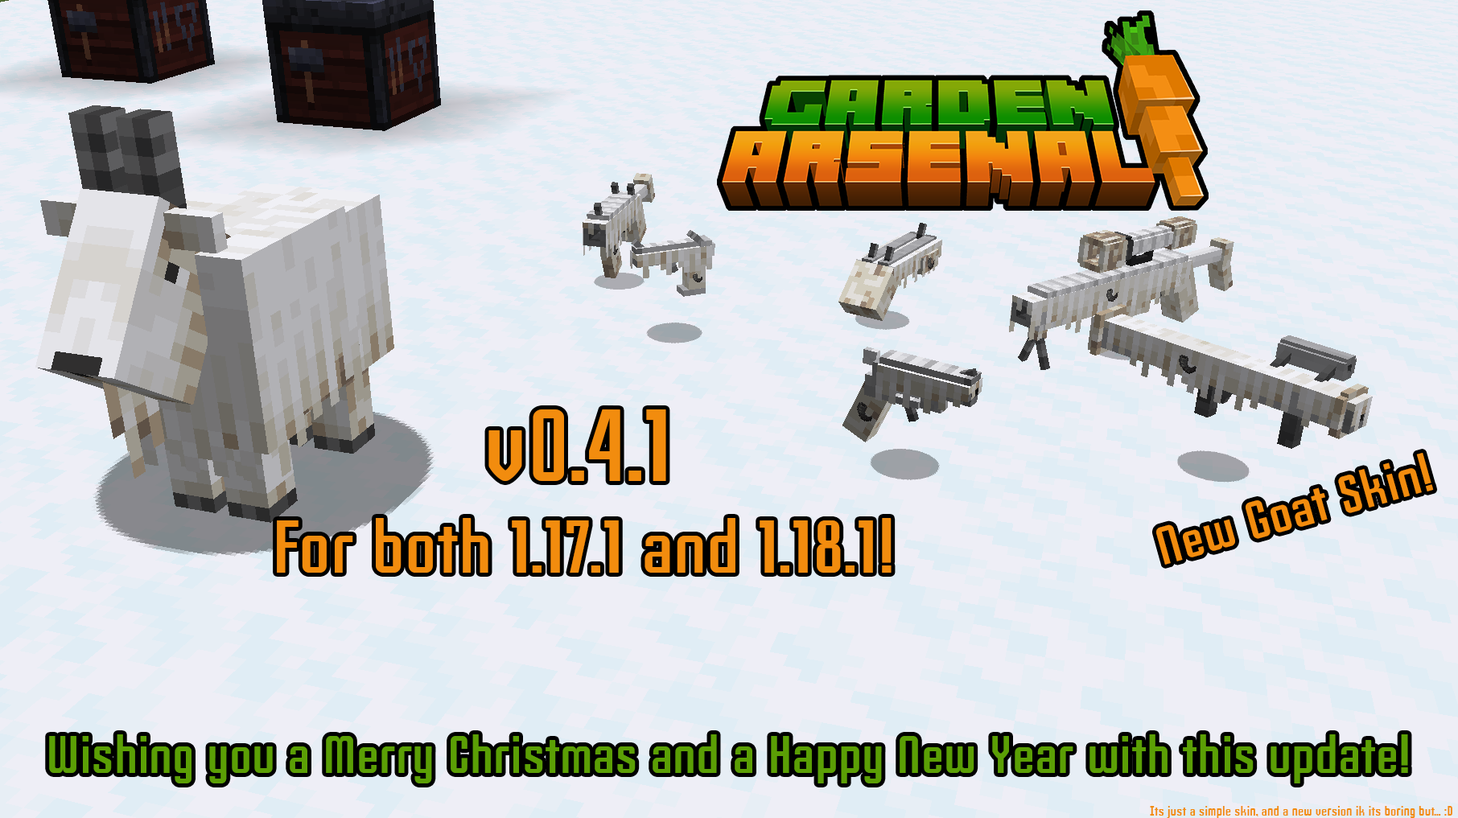
<style>
.page{position:relative;width:1458px;height:818px;background:#eeeef6}
.page>*{position:absolute;margin:0}
.t1{font:102.2px "SlimJim";color:#f28c0e}
.t2{font:52.8px "SlimJim";color:#f28c0e}
.t3{font:74.8px "SlimJim";color:#f28c0e}
.t4{font:52.8px "SlimJim";color:#5b9f05}
.t5{font:13.8px "SlimJim";color:#f28c0e}
</style>
<div class="page">
<p class="t1" style="left:488px;top:409px;width:178px;height:72px">v0.4.1</p>
<p class="t2" style="left:1156px;top:453px;width:277px;height:112px;rotate:-16deg">New Goat Skin!</p>
<p class="t3" style="left:277px;top:518px;width:614px;height:55px">For both 1.17.1 and 1.18.1!</p>
<p class="t4" style="left:49px;top:734px;width:1359px;height:49px">Wishing you a Merry Christmas and a Happy New Year with this update!</p>
<p class="t5" style="left:1150px;top:806px;width:302px;height:12px">Its just a simple skin, and a new version ik its boring but... :D</p>
</div>
